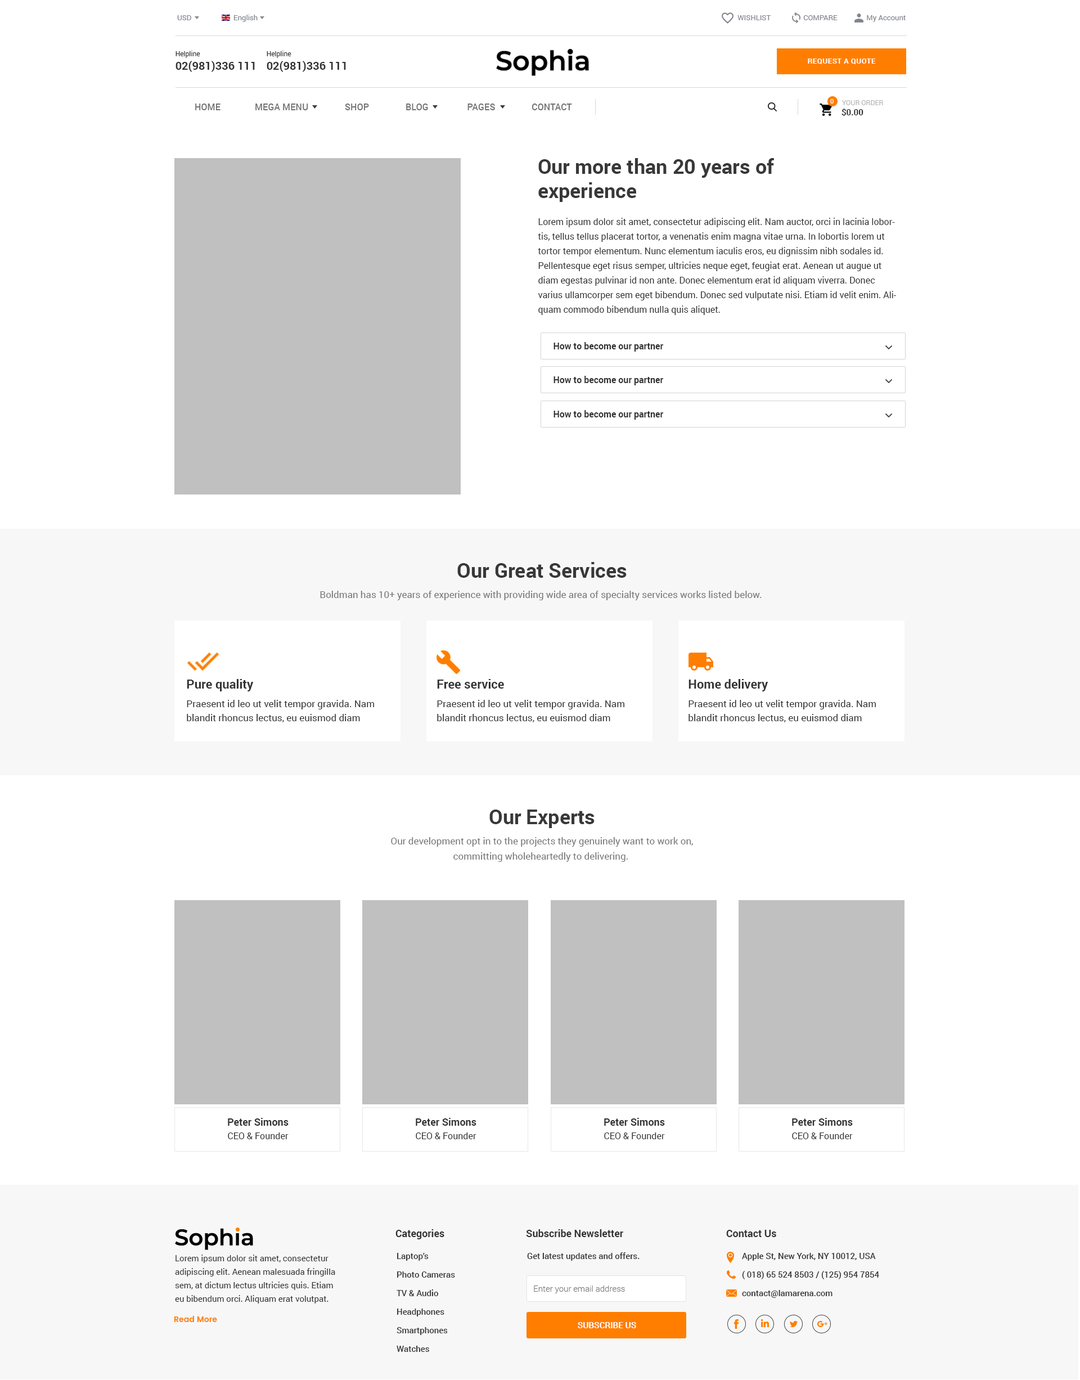
<style>
.page{position:relative;width:1080px;height:1380px;background:#ffffff}
.page>*{position:absolute;margin:0}
.t1{font:7.3px "Roboto-Regular";color:#81858c}
.t2{font:11.3px "Roboto-Bold";color:#333333}
.t3{font:6.8px "Roboto-Regular";color:#333333}
.t4{font:7.3px "Roboto-Bold";letter-spacing:0.04em;color:#ffffff}
.t5{font:6.2px "Roboto-Regular";color:#ffffff}
.t6{font:6.8px "Roboto-Regular";color:#b8b7b7}
.t7{font:9px "Roboto-Medium";color:#737373}
.t8{font:8.4px "Roboto-Bold";color:#333333}
.t9{font:20.2px/24.2px "Roboto-Bold";color:#383838}
.t10{font:9px/14.6px "Roboto-Regular";color:#333333}
.t11{font:9px "Roboto-Bold";color:#333333}
.t12{font:9.6px/20.2px "Roboto-Regular";color:#777777}
.t13{font:9.6px/18.6px "Roboto-Regular";color:#333333}
.t14{font:12.4px/20.2px "Roboto-Bold";color:#333333}
.t15{font:9.6px/14.1px "Roboto-Regular";color:#333333}
.t16{font:9.6px/15.2px "Roboto-Regular";color:#777777}
.t17{font:9px/13.5px "Roboto-Regular";color:#333333}
.t18{font:10.1px/20.2px "Roboto-Bold";color:#333333}
.t19{font:10.1px "Roboto-Bold";color:#333333}
.t20{font:8.4px/18.6px "Roboto-Medium";color:#333333}
.t21{font:8.4px "Roboto-Medium";color:#333333}
.t22{font:8.4px/13.5px "Roboto-Regular";color:#333333}
.t23{font:8.4px "Roboto-Light";color:#777777}
.t24{font:7.6px "Poppins-SemiBold";color:#ff7e00}
.t25{font:8.4px "Roboto-Bold";color:#ffffff}
</style>
<div class="page">
<p class="t1" style="left:177px;top:15px;width:14px;height:5px">USD</p>
<p class="t1" style="left:234px;top:15px;width:24px;height:7px">English</p>
<p class="t1" style="left:737px;top:15px;width:169px;height:7px">WISHLIST                  COMPARE                My Account</p>
<p class="t2" style="left:176px;top:51px;width:79px;height:21px"><span class="t3">Helpline<br></span>02(981)336 111</p>
<p class="t2" style="left:267px;top:51px;width:79px;height:21px"><span class="t3">Helpline<br></span>02(981)336 111</p>
<p class="t4" style="left:808px;top:58px;width:68px;height:6px">REQUEST A QUOTE</p>
<p class="t5" style="left:830px;top:99px;width:4px;height:5px">0</p>
<p class="t6" style="left:842px;top:100px;width:41px;height:5px">YOUR ORDER</p>
<p class="t7" style="left:195px;top:104px;width:377px;height:6px">HOME               MEGA MENU                SHOP                BLOG                 PAGES                CONTACT</p>
<p class="t8" style="left:842px;top:108px;width:21px;height:8px">$0.00</p>
<p class="t9" style="left:538px;top:158px;width:237px;height:44px">Our more than 20 years of <br>experience</p>
<p class="t10" style="left:538px;top:218px;width:358px;height:97px">Lorem ipsum dolor sit amet, consectetur adipiscing elit. Nam auctor, orci in lacinia lobortis, tellus tellus placerat tortor, a venenatis enim magna vitae urna. In lobortis lorem ut tortor tempor elementum. Nunc elementum iaculis eros, eu dignissim nibh sodales id. Pellentesque eget risus semper, ultricies neque eget, feugiat erat. Aenean ut augue ut diam egestas pulvinar id non ante. Donec elementum erat id aliquam viverra. Donec varius ullamcorper sem eget bibendum. Donec sed vulputate nisi. Etiam id velit enim. Aliquam commodo bibendum nulla quis aliquet.</p>
<p class="t11" style="left:554px;top:342px;width:110px;height:10px">How to become our partner</p>
<p class="t11" style="left:554px;top:376px;width:110px;height:9px">How to become our partner</p>
<p class="t11" style="left:554px;top:410px;width:110px;height:10px">How to become our partner</p>
<p class="t12" style="left:320px;top:562px;width:442px;height:38px;text-align:center"><span class="t9">Our Great Services<br></span>Boldman has 10+ years of experience with providing wide area of specialty services works listed below.</p>
<p class="t13" style="left:187px;top:679px;width:187px;height:43px"><span class="t14">Pure quality<br></span>Praesent id leo ut velit tempor gravida. Nam <span class="t15">blandit rhoncus lectus, eu euismod diam</span></p>
<p class="t13" style="left:437px;top:679px;width:187px;height:43px"><span class="t14">Free service<br></span>Praesent id leo ut velit tempor gravida. Nam <span class="t15">blandit rhoncus lectus, eu euismod diam</span></p>
<p class="t13" style="left:688px;top:679px;width:188px;height:43px"><span class="t14">Home delivery<br></span>Praesent id leo ut velit tempor gravida. Nam <span class="t15">blandit rhoncus lectus, eu euismod diam</span></p>
<p class="t12" style="left:391px;top:809px;width:302px;height:53px;text-align:center"><span class="t9">Our Experts<br></span>Our development opt in to the projects they genuinely want to work on,<br><span class="t16">committing wholeheartedly to delivering.</span></p>
<p class="t17" style="left:228px;top:1118px;width:61px;height:21px;text-align:center"><span class="t18">Peter Simons<br></span>CEO &amp; Founder</p>
<p class="t17" style="left:416px;top:1118px;width:60px;height:21px;text-align:center"><span class="t18">Peter Simons<br></span>CEO &amp; Founder</p>
<p class="t17" style="left:604px;top:1118px;width:61px;height:21px;text-align:center"><span class="t18">Peter Simons<br></span>CEO &amp; Founder</p>
<p class="t17" style="left:792px;top:1118px;width:61px;height:21px;text-align:center"><span class="t18">Peter Simons<br></span>CEO &amp; Founder</p>
<p class="t19" style="left:395px;top:1229px;width:49px;height:10px">Categories</p>
<p class="t19" style="left:526px;top:1229px;width:97px;height:8px">Subscribe Newsletter</p>
<p class="t19" style="left:726px;top:1230px;width:50px;height:7px">Contact Us</p>
<p class="t20" style="left:397px;top:1253px;width:58px;height:99px">Laptop’s<br>Photo Cameras<br>TV &amp; Audio<br>Headphones<br>Smartphones<br>Watches</p>
<p class="t21" style="left:527px;top:1252px;width:113px;height:9px">Get latest updates and offers.</p>
<p class="t20" style="left:742px;top:1253px;width:137px;height:45px">Apple St, New York, NY 10012, USA<br>( 018) 65 524 8503 / (125) 954 7854<br>contact@lamarena.com</p>
<p class="t22" style="left:175px;top:1254px;width:160px;height:49px">Lorem ipsum dolor sit amet, consectetur adipiscing elit. Aenean malesuada fringilla sem, at dictum lectus ultricies quis. Etiam eu bibendum orci. Aliquam erat volutpat.</p>
<p class="t23" style="left:534px;top:1285px;width:91px;height:8px">Enter your email address</p>
<p class="t24" style="left:174px;top:1316px;width:43px;height:6px">Read More</p>
<p class="t25" style="left:578px;top:1322px;width:58px;height:6px">SUBSCRIBE US</p>
</div>
